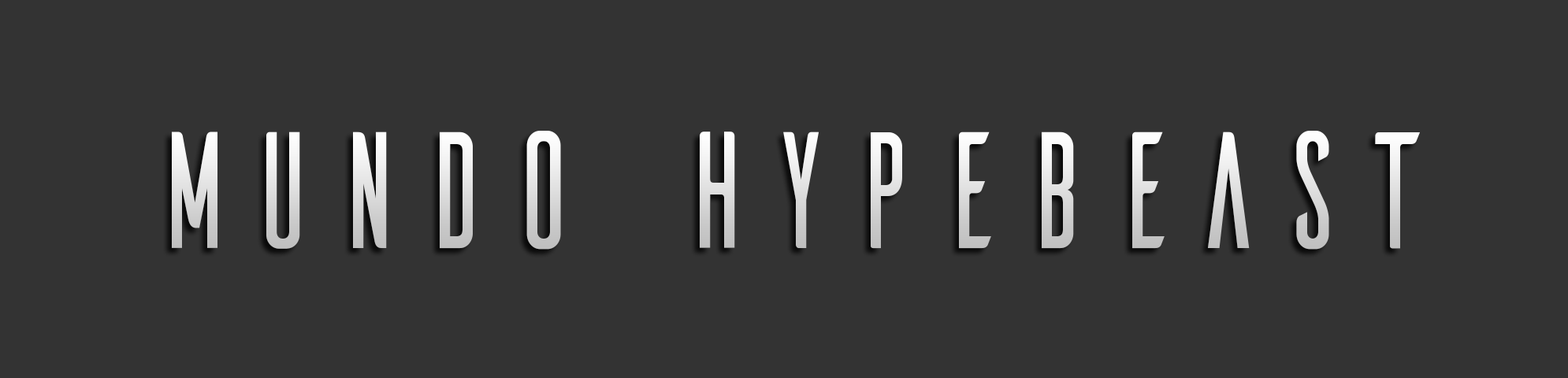
<style>
.page{position:relative;width:1568px;height:378px;background:#333333}
.page>*{position:absolute;margin:0}
.t1{font:165.8px "Ailerons-Regular";scale:0.87 1}
</style>
<div class="page">
<p class="t1" style="left:172px;top:131px;width:1248px;height:119px">Mundo Hypebeast</p>
</div>
